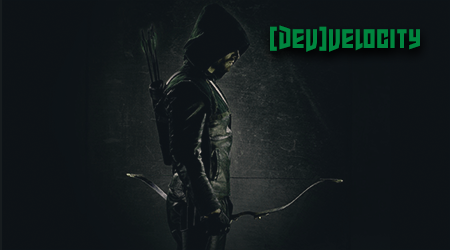
<style>
.page{position:relative;width:450px;height:250px}
.page>*{position:absolute;margin:0}
.t1{font:27.4px "HighJinks";letter-spacing:0.05em;color:#00863f;text-transform:uppercase}
</style>
<div class="page">
<p class="t1" style="left:270px;top:25px;width:150px;height:27px">[Dev]Velocity</p>
</div>
